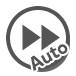
<style>
.page{position:relative;width:76px;height:76px;background:#ffffff}
.page>*{position:absolute;margin:0}
.t1{font:18.8px "MikadoMedium";color:#535453}
</style>
<div class="page">
<p class="t1" style="left:31px;top:44px;width:37px;height:27px;rotate:-30deg">Auto</p>
</div>
